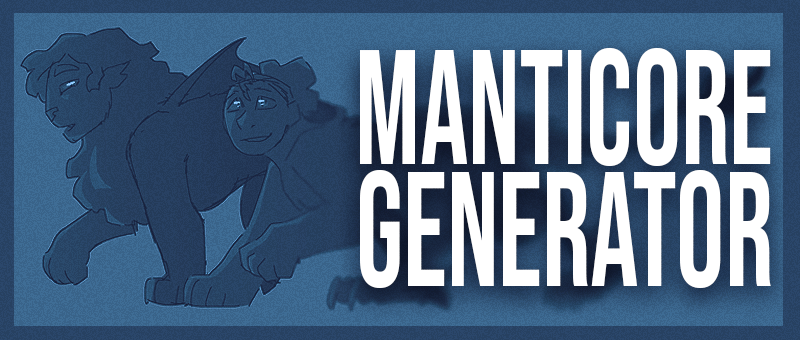
<style>
.page{position:relative;width:800px;height:340px}
.page>*{position:absolute;margin:0}
.t1{font:162.4px/121.8px "BebasNeue-Regular";color:#ffffff;scale:0.74 1}
</style>
<div class="page">
<p class="t1" style="left:360px;top:48px;width:411px;height:240px;text-align:right">Manticore<br>Generator</p>
</div>
